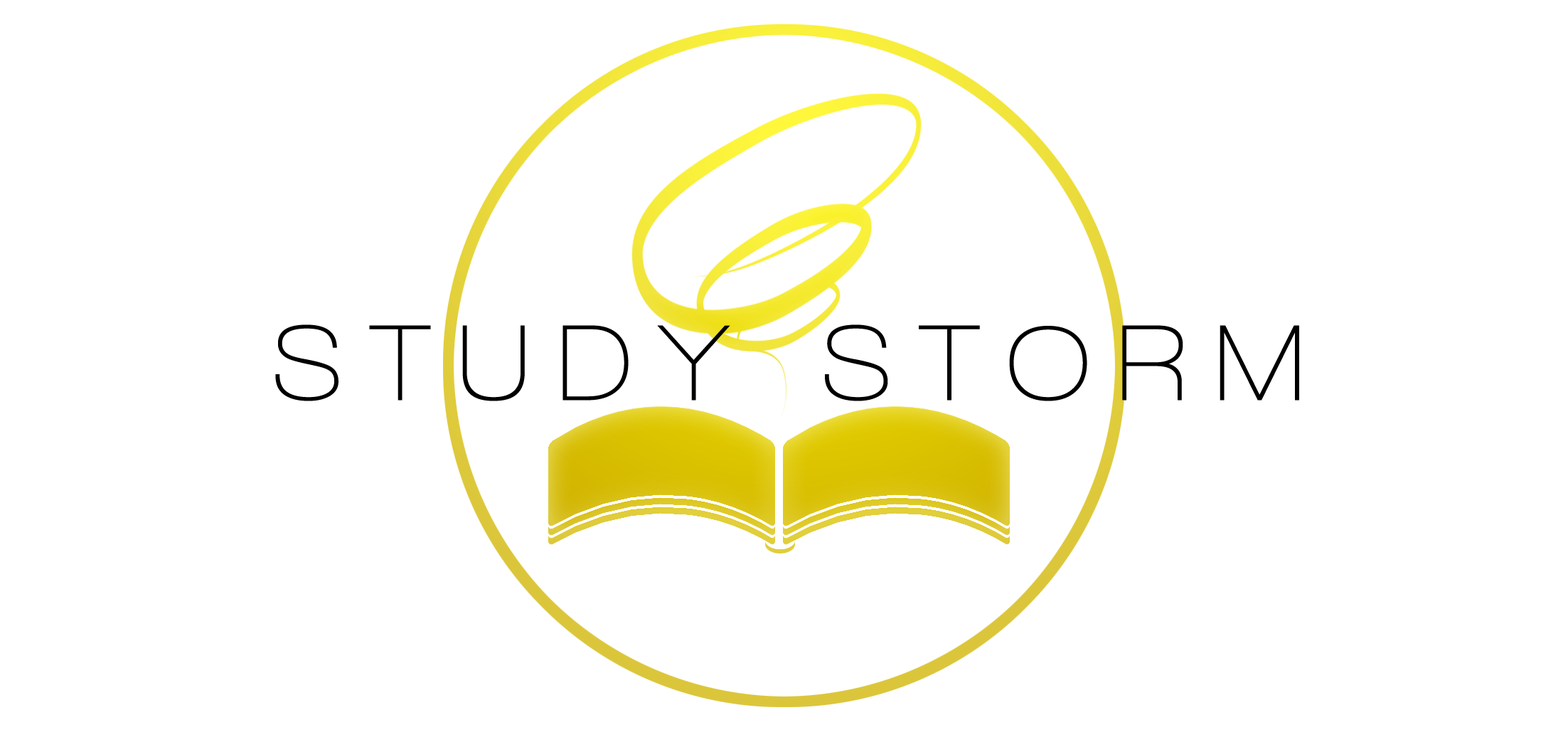
<style>
.page{position:relative;width:1568px;height:747px;background:#ffffff}
.page>*{position:absolute;margin:0}
.t1{font:109.8px "WalkwaySemiBold";letter-spacing:0.25em;color:#000000}
</style>
<div class="page">
<p class="t1" style="left:275px;top:324px;width:1024px;height:77px">STUDY STORM</p>
</div>
